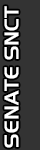
<style>
.page{position:relative;width:40px;height:150px;background:#333333}
.page>*{position:absolute;margin:0}
.t1{font:20px "SliderTI";color:#ffffff;text-transform:uppercase}
</style>
<div class="page">
<p class="t1" style="left:4px;top:6px;width:15px;height:142px;rotate:-90deg">Senate Snct</p>
</div>
